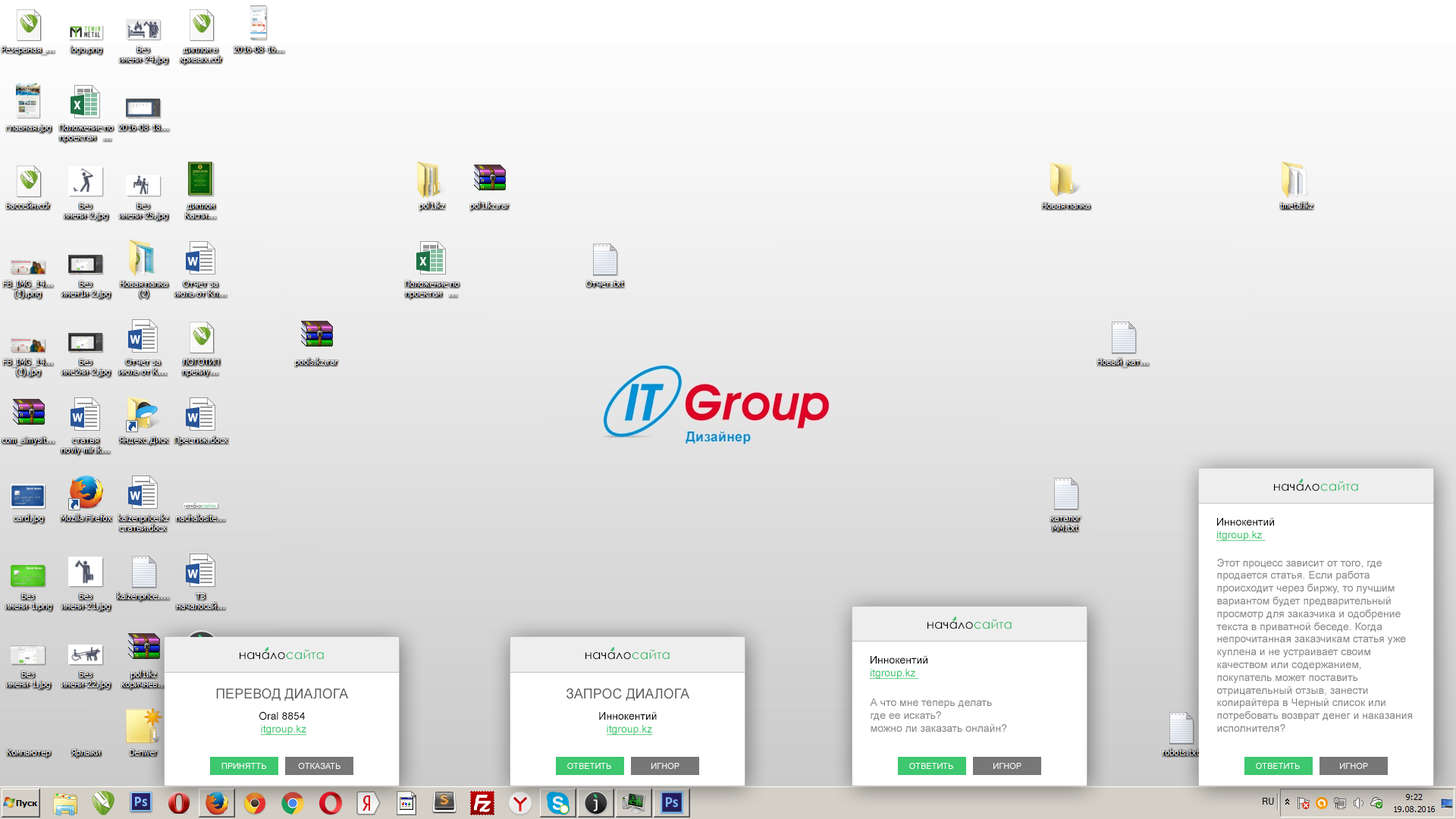
<style>
.page{position:relative;width:1456px;height:819px}
.page>*{position:absolute;margin:0}
.t1{font:12.5px "CenturyGothic";color:#000000;scale:1.04 1}
.t2{font:12.5px "CenturyGothic";color:#34ba65;scale:1.04 1}
.t3{font:10.6px "ArialMT";color:#000000}
.t4{font:10.6px "ArialMT";color:#3dc76f;text-decoration:underline}
.t5{font:10.6px "ArialMT";color:#868686}
.t6{font:13.6px "ArialMT";color:#615e5c}
.t7{font:8.3px "ArialMT";color:#ffffff}
</style>
<div class="page">
<p class="t1" style="left:1274px;top:481px;width:84px;height:10px">начало<span class="t2">сайта</span></p>
<p class="t3" style="left:1216px;top:517px;width:58px;height:24px">Иннокентий <br><span class="t4">itgroup.kz</span></p>
<p class="t5" style="left:1216px;top:558px;width:196px;height:174px">Этот процесс зависит от того, где <br>продается статья. Если работа <br>происходит через биржу, то лучшим <br>вариантом будет предварительный <br>просмотр для заказчика и одобрение <br>текста в приватной беседе. Когда <br>непрочитанная заказчикам статья уже <br>куплена и не устраивает своим <br>качеством или содержанием, <br>покупатель может поставить <br>отрицательный отзыв, занести <br>копирайтера в Черный список или <br>потребовать возврат денег и наказания <br>исполнителя?</p>
<p class="t1" style="left:927px;top:619px;width:85px;height:10px">начало<span class="t2">сайта</span></p>
<p class="t1" style="left:240px;top:649px;width:84px;height:11px">начало<span class="t2">сайта</span></p>
<p class="t1" style="left:585px;top:649px;width:85px;height:11px">начало<span class="t2">сайта</span></p>
<p class="t3" style="left:869px;top:655px;width:58px;height:24px">Иннокентий <br><span class="t4">itgroup.kz</span></p>
<p class="t6" style="left:216px;top:688px;width:132px;height:13px">ПЕРЕВОД ДИАЛОГА</p>
<p class="t6" style="left:566px;top:688px;width:123px;height:13px">ЗАПРОС ДИАЛОГА</p>
<p class="t5" style="left:870px;top:698px;width:137px;height:34px"><span class="t3"><br></span>А что мне теперь делать<br>где ее искать?<br>можно ли заказать онлайн?</p>
<p class="t4" style="left:259px;top:711px;width:48px;height:25px;text-align:center"><span class="t3">Oral 8854 <br></span>itgroup.kz</p>
<p class="t3" style="left:599px;top:711px;width:58px;height:25px;text-align:center">Иннокентий <br><span class="t4">itgroup.kz</span></p>
<p class="t7" style="left:221px;top:763px;width:45px;height:6px">ПРИНЯТТЬ</p>
<p class="t7" style="left:298px;top:763px;width:42px;height:6px">ОТКАЗАТЬ</p>
<p class="t7" style="left:567px;top:763px;width:44px;height:6px">ОТВЕТИТЬ</p>
<p class="t7" style="left:651px;top:763px;width:28px;height:6px">ИГНОР</p>
<p class="t7" style="left:909px;top:763px;width:44px;height:6px">ОТВЕТИТЬ</p>
<p class="t7" style="left:993px;top:763px;width:28px;height:6px">ИГНОР</p>
<p class="t7" style="left:1256px;top:763px;width:44px;height:6px">ОТВЕТИТЬ</p>
<p class="t7" style="left:1340px;top:763px;width:28px;height:6px">ИГНОР</p>
</div>
